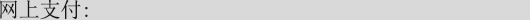
<style>
.page{position:relative;width:530px;height:20px;background:#dad9d9}
.page>*{position:absolute;margin:0}
.t1{font:20.8px "SimSun";color:#1a1717}
</style>
<div class="page">
<p class="t1" style="left:0px;top:0px;width:88px;height:20px">网上支付:</p>
</div>
